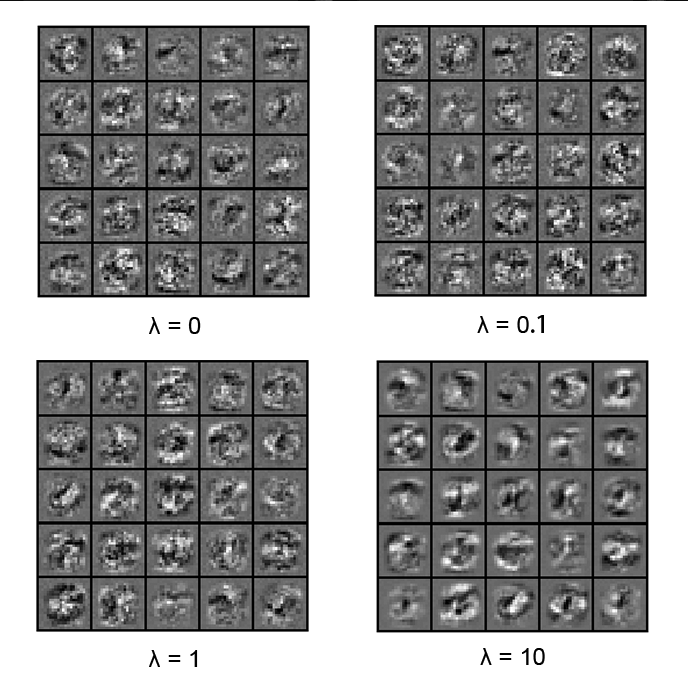
<style>
.page{position:relative;width:688px;height:688px;background:#ffffff}
.page>*{position:absolute;margin:0}
.t1{font:24px "ArialMT";color:#010101}
.t2{font:24px "AdobeHeitiStd-Regular";color:#010101}
</style>
<div class="page">
<p class="t1" style="left:149px;top:316px;width:52px;height:17px">λ = 0</p>
<p class="t1" style="left:477px;top:314px;width:67px;height:18px">λ = 0<span class="t2">.1</span></p>
<p class="t1" style="left:149px;top:649px;width:49px;height:17px">λ = 1</p>
<p class="t1" style="left:480px;top:647px;width:65px;height:17px">λ = 10</p>
</div>
